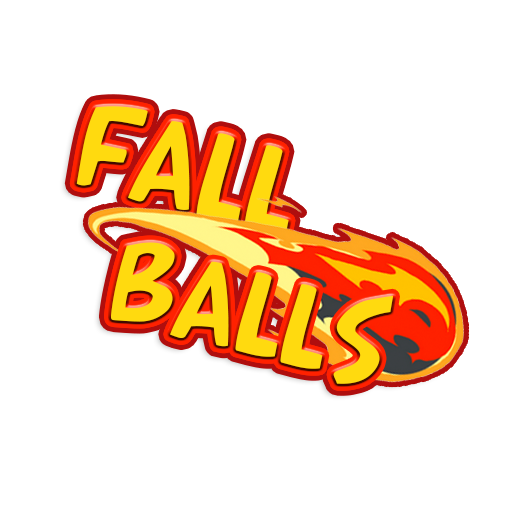
<style>
.page{position:relative;width:512px;height:512px;background:#ffffff}
.page>*{position:absolute;margin:0}
.t1{font:120.5px "Arnold21";color:#ffda0f}
.t2{font:114.6px "Arnold21";color:#ffda0f}
</style>
<div class="page">
<p class="t1" style="left:76px;top:106px;width:213px;height:129px;rotate:15deg">FALL</p>
<p class="t2" style="left:111px;top:242px;width:282px;height:142px;rotate:15deg">BALLS</p>
</div>
